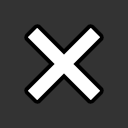
<style>
.page{position:relative;width:128px;height:128px;background:#333333}
.page>*{position:absolute;margin:0}
.t1{font:108.1px "SourceHanSans-Heavy";color:#ffffff}
</style>
<div class="page">
<p class="t1" style="left:28px;top:28px;width:72px;height:72px">×</p>
</div>
